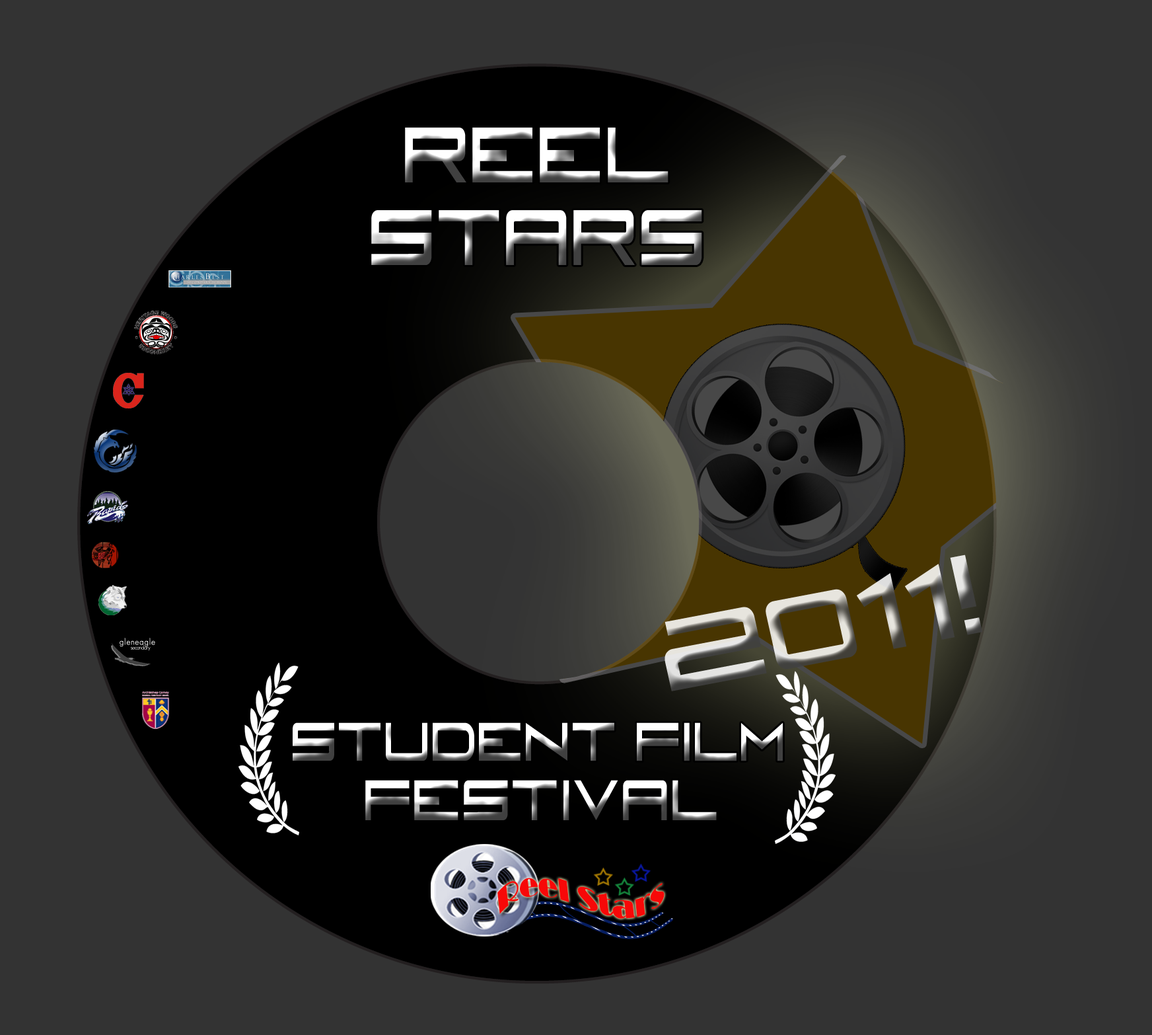
<style>
.page{position:relative;width:1152px;height:1035px;background:#333333}
.page>*{position:absolute;margin:0}
.t1{font:85.6px "FireyeGF3Headline";scale:0.67 1}
.t2{font:108px "FireyeGF3Headline";scale:0.86 1}
.t3{font:117px "FireyeGF3Headline";scale:0.86 1}
.t4{font:123.2px "FireyeGF3Headline";scale:0.94 1}
.t5{font:59.2px "FireyeGF3Headline";scale:0.67 1}
.t6{font:62.3px "FireyeGF3Headline";scale:0.67 1}
</style>
<div class="page">
<p class="t1" style="left:371px;top:128px;width:331px;height:137px;text-align:center">REEL <br>STARS</p>
<p class="t2" style="left:665px;top:554px;width:318px;height:137px;rotate:-11deg">20<span class="t3">11</span><span class="t4">!</span></p>
<p class="t5" style="left:293px;top:722px;width:490px;height:39px">STUDENT FILM</p>
<p class="t6" style="left:365px;top:780px;width:352px;height:40px">FESTIVAL</p>
</div>
